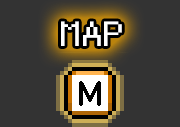
<style>
.page{position:relative;width:180px;height:127px;background:#333333}
.page>*{position:absolute;margin:0}
.t1{font:49px "Silver";color:#ffffff;scale:1.3 1}
</style>
<div class="page">
<p class="t1" style="left:61px;top:21px;width:61px;height:25px">MAP</p>
</div>
